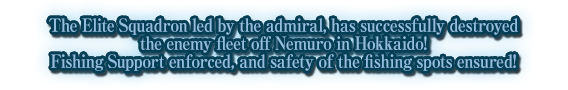
<style>
.page{position:relative;width:568px;height:90px}
.page>*{position:absolute;margin:0}
.t1{font:18px/18px "RyuminPro-ExBold";letter-spacing:-0.04em;color:#93bee0;scale:0.9 1}
</style>
<div class="page">
<p class="t1" style="left:49px;top:18px;width:469px;height:53px;text-align:center">The Elite Squadron led by the admiral, has successfully destroyed<br>the enemy fleet off Nemuro in Hokkaido!<br>Fishing Support enforced, and safety of the fishing spots ensured!</p>
</div>
